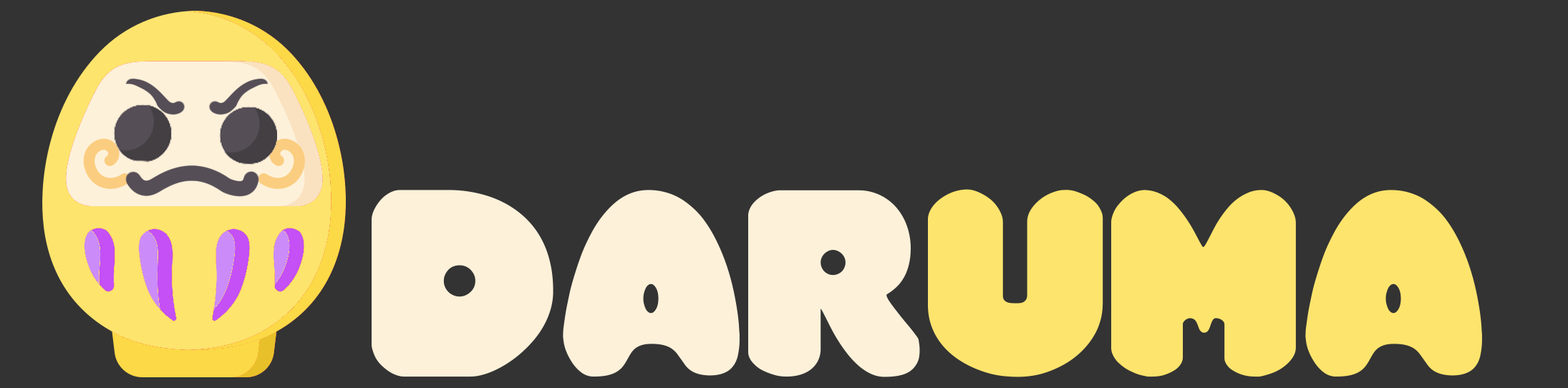
<style>
.page{position:relative;width:1568px;height:388px;background:#333333}
.page>*{position:absolute;margin:0}
.t1{font:286.4px "Overmuch";color:#fef1da}
.t2{font:286.4px "Overmuch";color:#fde46d}
</style>
<div class="page">
<p class="t1" style="left:372px;top:189px;width:1110px;height:188px">DAR<span class="t2">UMA</span></p>
</div>
